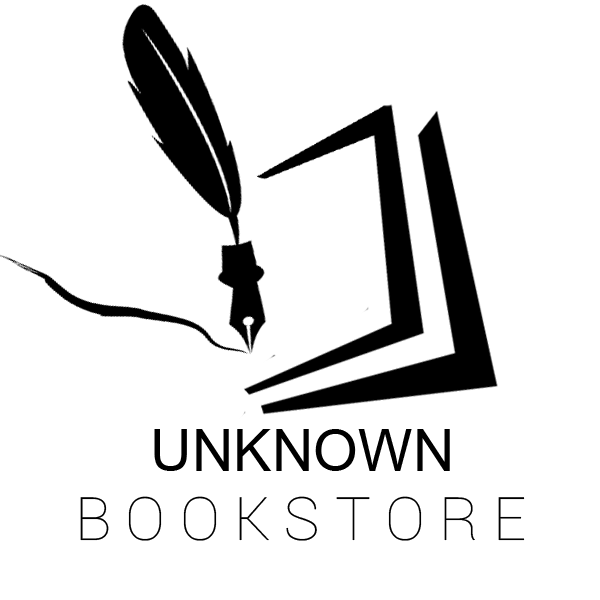
<style>
.page{position:relative;width:600px;height:600px;background:#ffffff}
.page>*{position:absolute;margin:0}
.t1{font:88.4px "BrowalliaNew";color:#000000}
.t2{font:60px "Roboto-Thin";color:#000000}
</style>
<div class="page">
<p class="t1" style="left:154px;top:429px;width:296px;height:42px">UNKNOWN</p>
<p class="t2" style="left:80px;top:496px;width:445px;height:45px">B O O K S T O R E</p>
</div>
